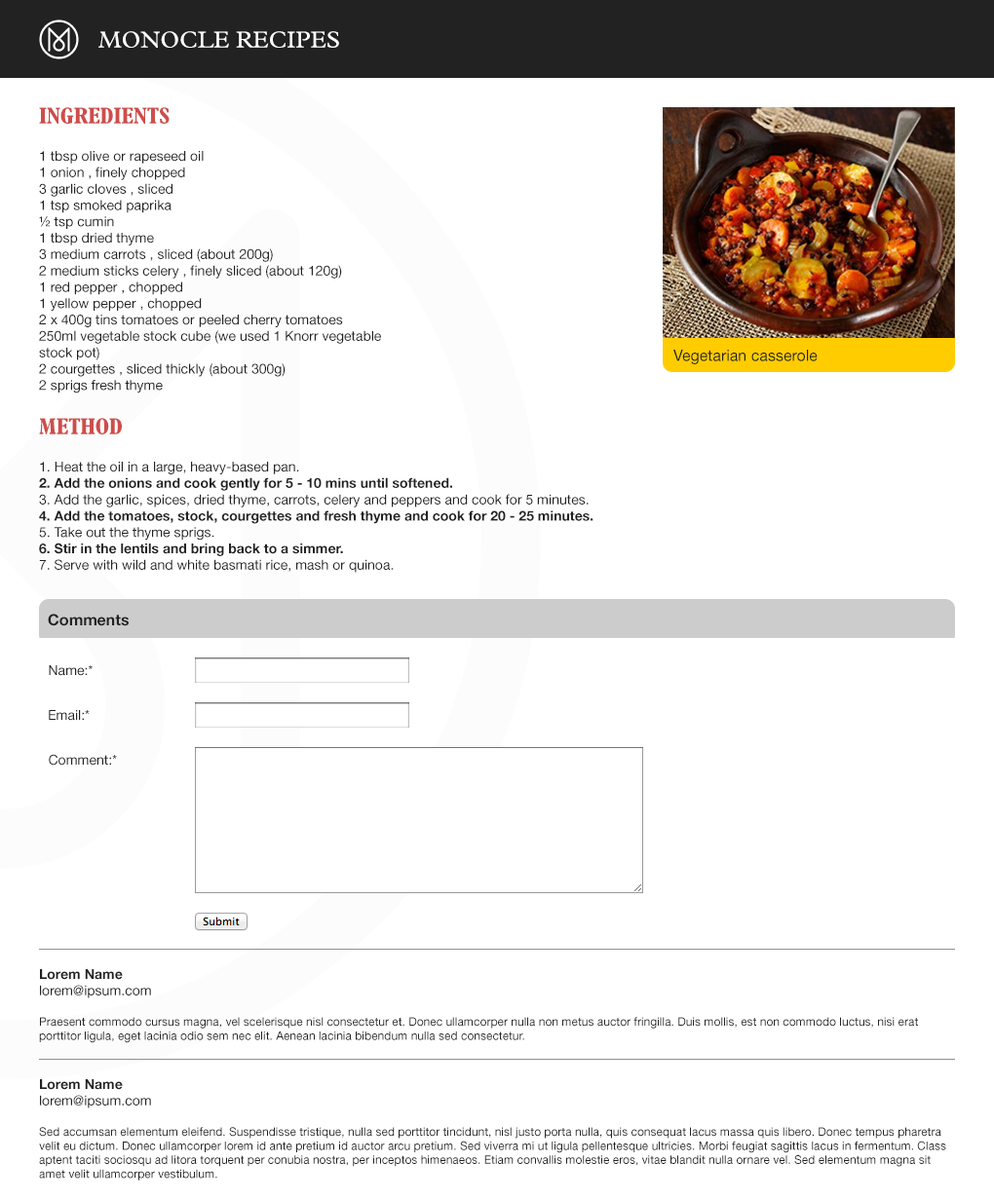
<style>
.page{position:relative;width:994px;height:1200px;background:#ffffff}
.page>*{position:absolute;margin:0}
.t1{font:23.4px "PlantinMTStd-Regular";color:#ffffff}
.t2{font:13.6px "HelveticaNeue-Roman";color:#222222}
.t3{font:23.4px "PlantinMTStd-BoldCondensed";color:#ce4d4a;text-transform:uppercase}
.t4{font:15.6px "HelveticaNeue-Roman";color:#222222}
.t5{font:23.4px "PlantinMTStd-BoldCondensed";color:#ce4d4a}
.t6{font:13.6px "HelveticaNeue-Bold";color:#222222}
.t7{font:15.6px "HelveticaNeue-Bold";color:#222222}
.t8{font:11.7px "HelveticaNeue-Roman";color:#222222}
</style>
<div class="page">
<p class="t1" style="left:98px;top:31px;width:241px;height:17px">MONOCLE RECIPES</p>
<p class="t2" style="left:39px;top:107px;width:342px;height:287px"><span class="t3">Ingredients<br><br></span>1 tbsp olive or rapeseed oil<br>1 onion , finely chopped<br>3 garlic cloves , sliced<br>1 tsp smoked paprika<br>½ tsp cumin<br>1 tbsp dried thyme<br>3 medium carrots , sliced (about 200g)<br>2 medium sticks celery , finely sliced (about 120g)<br>1 red pepper , chopped<br>1 yellow pepper , chopped<br>2 x 400g tins tomatoes or peeled cherry tomatoes<br>250ml vegetable stock cube (we used 1 Knorr vegetable stock pot)<br>2 courgettes , sliced thickly (about 300g)<br>2 sprigs fresh thyme<br>250g cooked lentils (we used Merchant Gourmet ready-to-eat Puy lentils)</p>
<p class="t4" style="left:673px;top:350px;width:144px;height:14px">Vegetarian casserole</p>
<p class="t2" style="left:39px;top:418px;width:554px;height:155px"><span class="t5">METHOD<br><br></span>1. Heat the oil in a large, heavy-based pan. <br><span class="t6">2. Add the onions and cook gently for 5 - 10 mins until softened.<br></span>3. Add the garlic, spices, dried thyme, carrots, celery and peppers and cook for 5 minutes.<br><span class="t6">4. Add the tomatoes, stock, courgettes and fresh thyme and cook for 20 - 25 minutes.<br></span>5. Take out the thyme sprigs. <br><span class="t6">6. Stir in the lentils and bring back to a simmer. <br></span>7. Serve with wild and white basmati rice, mash or quinoa.</p>
<p class="t7" style="left:48px;top:614px;width:81px;height:12px">Comments</p>
<p class="t2" style="left:49px;top:665px;width:44px;height:11px">Name:*</p>
<p class="t2" style="left:49px;top:710px;width:41px;height:11px">Email:*</p>
<p class="t2" style="left:49px;top:754px;width:68px;height:12px">Comment:*</p>
<p class="t8" style="left:39px;top:969px;width:879px;height:74px"><span class="t6">Lorem Name<br></span><span class="t2">lorem@ipsum.com<br><br></span>Praesent commodo cursus magna, vel scelerisque nisl consectetur et. Donec ullamcorper nulla non metus auctor fringilla. Duis mollis, est non commodo luctus, nisi erat porttitor ligula, eget lacinia odio sem nec elit. Aenean lacinia bibendum nulla sed consectetur.</p>
<p class="t8" style="left:39px;top:1079px;width:907px;height:102px"><span class="t6">Lorem Name<br></span><span class="t2">lorem@ipsum.com<br><br></span>Sed accumsan elementum eleifend. Suspendisse tristique, nulla sed porttitor tincidunt, nisl justo porta nulla, quis consequat lacus massa quis libero. Donec tempus pharetra velit eu dictum. Donec ullamcorper lorem id ante pretium id auctor arcu pretium. Sed viverra mi ut ligula pellentesque ultricies. Morbi feugiat sagittis lacus in fermentum. Class aptent taciti sociosqu ad litora torquent per conubia nostra, per inceptos himenaeos. Etiam convallis molestie eros, vitae blandit nulla ornare vel. Sed elementum magna sit amet velit ullamcorper vestibulum.</p>
</div>
